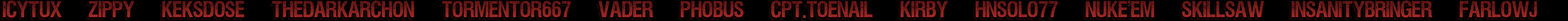
<style>
.page{position:relative;width:1568px;height:21px;background:#000000}
.page>*{position:absolute;margin:0}
.t1{font:18.1px "VIPERNORA"}
</style>
<div class="page">
<p class="t1" style="left:3px;top:1px;width:1534px;height:17px">ICYTUX   ZIPPY   KEKSDOSE   THEDARKARCHON   Tormentor667   VADER   PHOBUS   CPT.TOENAIL   Kirby   HNSOLO77   NUKE'EM   SKILLSAW   INSANITYBRINGER   FARLOWJ</p>
</div>
